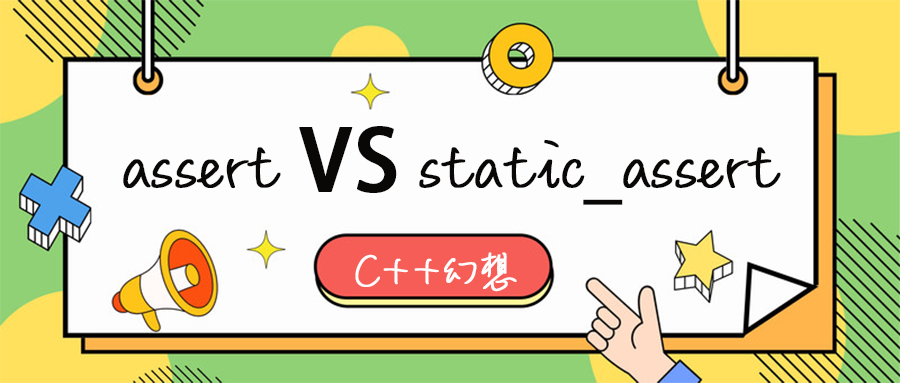
<style>
.page{position:relative;width:900px;height:383px;background:#fdfdfd}
.page>*{position:absolute;margin:0}
.t1{font:71.1px "MLingWaiMedium-SC";color:#0a0707;font-weight:bold}
.t2{font:83.3px "AdobeHeitiStd-Regular";color:#0a0707;font-weight:bold}
.t3{font:47px "MLingWaiMedium-SC";color:#fdfdfd;font-weight:bold}
</style>
<div class="page">
<p class="t1" style="left:123px;top:126px;width:658px;height:79px">assert <span class="t2">VS </span>static_assert</p>
<p class="t3" style="left:355px;top:252px;width:162px;height:40px">C++幻想</p>
</div>
